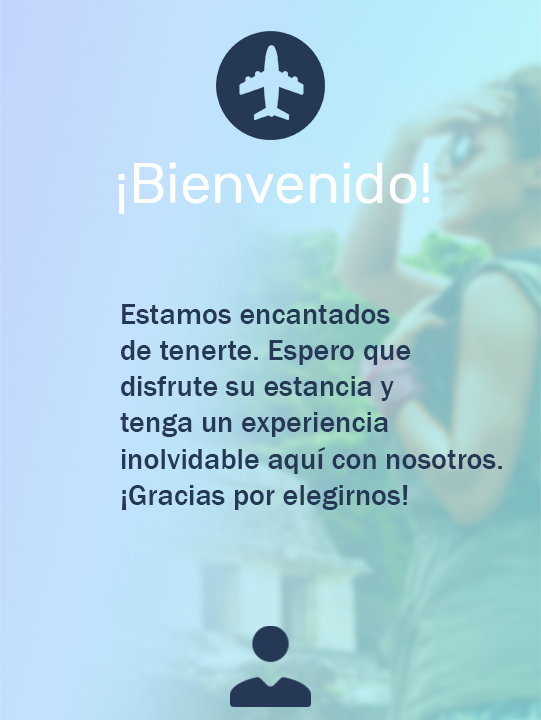
<style>
.page{position:relative;width:541px;height:720px}
.page>*{position:absolute;margin:0}
.t1{font:56.3px "Rubik-Regular";color:#ffffff}
.t2{font:30.2px "FranklinGothic-Medium";color:#253956}
</style>
<div class="page">
<p class="t1" style="left:118px;top:162px;width:311px;height:52px">¡Bienvenido!</p>
<p class="t2" style="left:120px;top:304px;width:382px;height:206px">Estamos encantados <br>de tenerte. Espero que <br>disfrute su estancia y <br>tenga un experiencia<br>inolvidable aquí con nosotros.<br>¡Gracias por elegirnos!</p>
</div>
